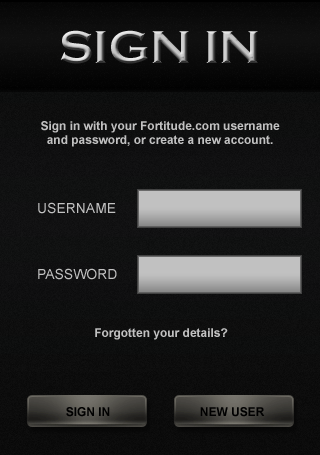
<style>
.page{position:relative;width:320px;height:455px}
.page>*{position:absolute;margin:0}
.t1{font:47.8px "CopperplateGothic-Bold"}
.t2{font:12px "Arial-BoldMT";color:#c1c1c1}
.t3{font:13.9px "ArialMT";color:#c1c1c1}
.t4{font:12px "Arial-BoldMT";color:#000000}
</style>
<div class="page">
<p class="t1" style="left:60px;top:30px;width:198px;height:34px">SIGN IN</p>
<p class="t2" style="left:41px;top:121px;width:239px;height:26px;text-align:center">Sign in with your Fortitude.com username<br>and password, or create a new account.</p>
<p class="t3" style="left:38px;top:202px;width:78px;height:12px">USERNAME</p>
<p class="t3" style="left:38px;top:268px;width:79px;height:12px">PASSWORD</p>
<p class="t2" style="left:95px;top:328px;width:133px;height:12px">Forgotten your details?</p>
<p class="t4" style="left:66px;top:407px;width:44px;height:10px">SIGN IN</p>
<p class="t4" style="left:200px;top:407px;width:65px;height:10px">NEW USER</p>
</div>
